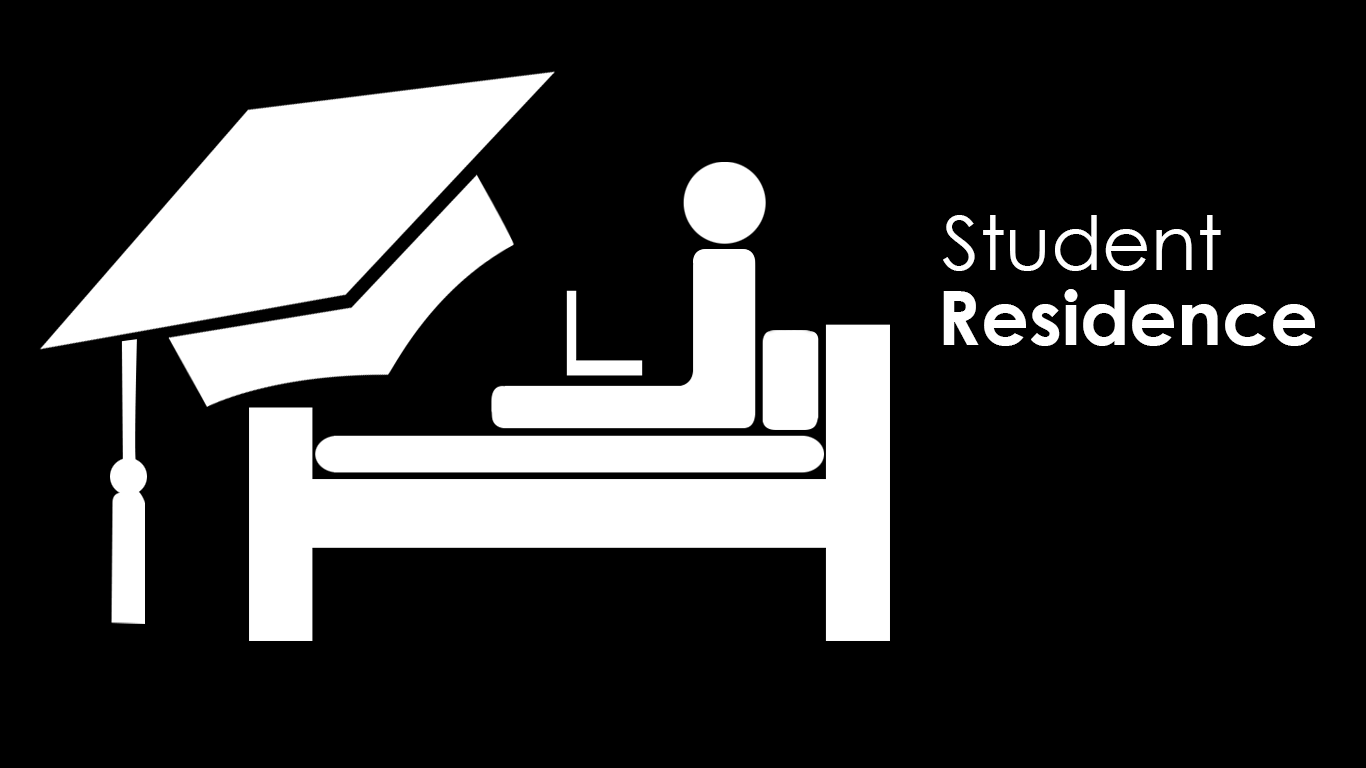
<style>
.page{position:relative;width:1366px;height:768px;background:#000000}
.page>*{position:absolute;margin:0}
.t1{font:75px "CenturyGothic";color:#ffffff}
.t2{font:75px "CenturyGothic-Bold";color:#ffffff}
</style>
<div class="page">
<p class="t1" style="left:943px;top:215px;width:278px;height:56px">Student</p>
<p class="t2" style="left:943px;top:289px;width:372px;height:57px">Residence</p>
</div>
